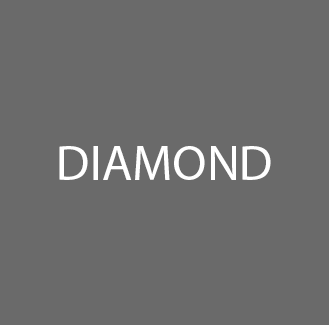
<style>
.page{position:relative;width:329px;height:325px;background:#6a6a6a}
.page>*{position:absolute;margin:0}
.t1{font:50px "MyriadPro-Regular";color:#ffffff}
</style>
<div class="page">
<p class="t1" style="left:59px;top:146px;width:212px;height:34px">DIAMOND</p>
</div>
